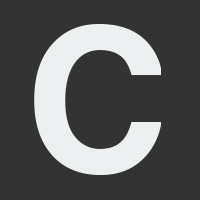
<style>
.page{position:relative;width:200px;height:200px;background:#333333}
.page>*{position:absolute;margin:0}
.t1{font:200px "Helvetica-Bold";letter-spacing:-0.05em;color:#ecf0f1}
</style>
<div class="page">
<p class="t1" style="left:34px;top:24px;width:127px;height:151px">C</p>
</div>
